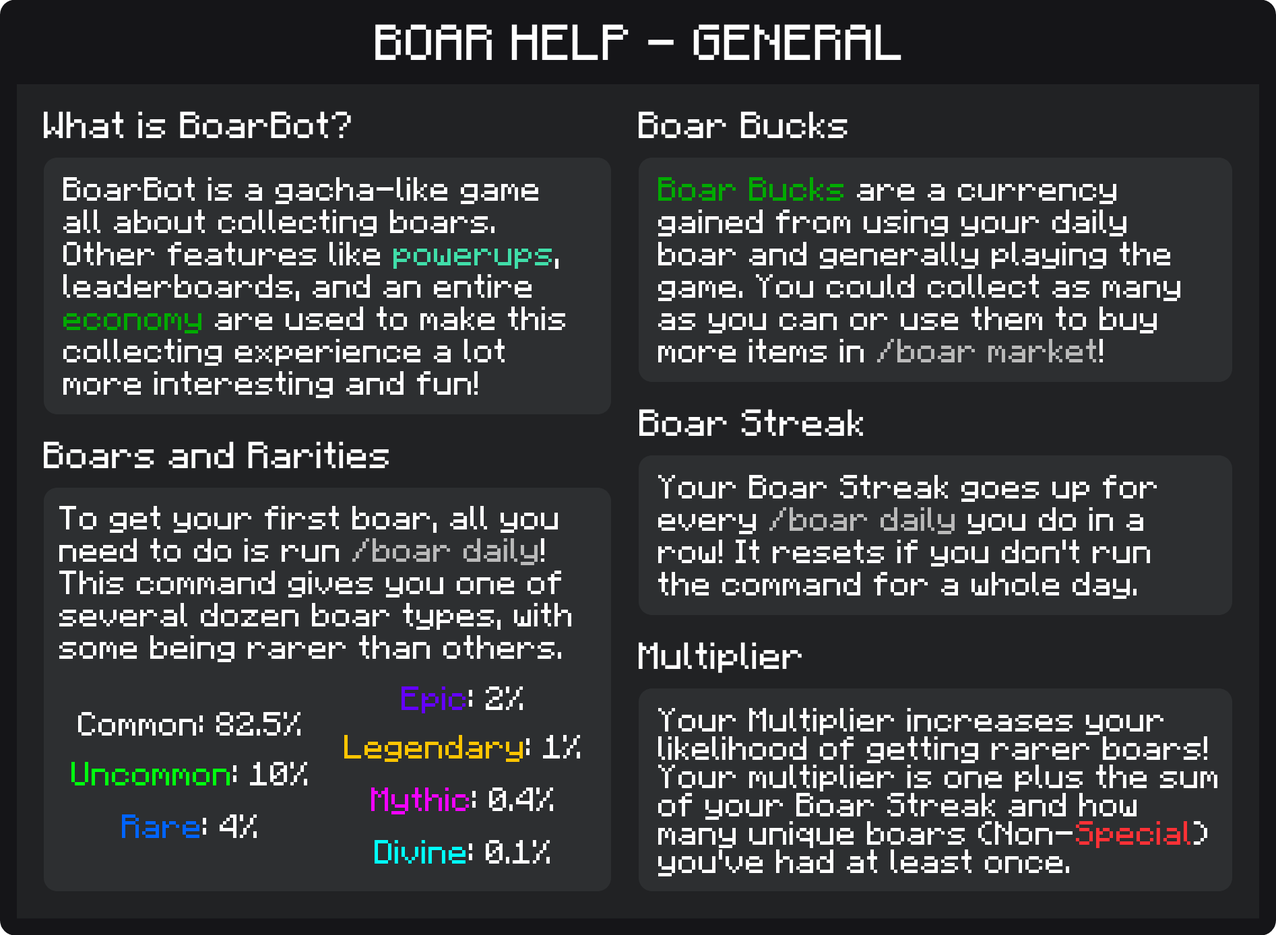
<style>
.page{position:relative;width:1276px;height:935px;background:#2d2f31}
.page>*{position:absolute;margin:0}
.t1{font:40.4px "F77-Minecraft";color:#ffffff}
.t2{font:30.3px "F77-Minecraft";color:#ffffff}
.t3{font:26.9px "F77-Minecraft";color:#ffffff}
.t4{font:26.9px "F77-Minecraft";color:#40dea9}
.t5{font:26.9px "F77-Minecraft";color:#00aa00}
.t6{font:26.9px "F77-Minecraft";color:#bababa}
.t7{font:26.9px "F77-Minecraft";color:#6400ff}
.t8{font:26.9px/28.3px "F77-Minecraft";color:#ffffff}
.t9{font:26.9px/28.3px "F77-Minecraft";color:#ff3136}
.t10{font:26.9px "F77-Minecraft";color:#ffc500}
.t11{font:26.9px "F77-Minecraft";color:#00ff0f}
.t12{font:26.9px "F77-Minecraft";color:#f300ff}
.t13{font:26.9px "F77-Minecraft";color:#0064ff}
.t14{font:26.9px "F77-Minecraft";color:#00fffb}
</style>
<div class="page">
<p class="t1" style="left:375px;top:24px;width:526px;height:36px">BOAR HELP - GENERAL</p>
<p class="t2" style="left:44px;top:111px;width:307px;height:27px">What is BoarBot?</p>
<p class="t2" style="left:638px;top:111px;width:209px;height:27px">Boar Bucks</p>
<p class="t3" style="left:63px;top:177px;width:502px;height:221px">BoarBot is a gacha-like game <br>all about collecting boars. <br>Other features like <span class="t4">powerups</span>, <br>leaderboards, and an entire <br><span class="t5">economy </span>are used to make this <br>collecting experience a lot <br>more interesting and fun!</p>
<p class="t3" style="left:658px;top:177px;width:522px;height:185px"><span class="t5">Boar Bucks </span>are a currency <br>gained from using your daily <br>boar and generally playing the <br>game. You could collect as many <br>as you can or use them to buy <br>more items in <span class="t6">/boar market</span>!</p>
<p class="t2" style="left:639px;top:409px;width:224px;height:27px">Boar Streak</p>
<p class="t2" style="left:44px;top:441px;width:345px;height:27px">Boars and Rarities</p>
<p class="t3" style="left:658px;top:475px;width:498px;height:124px">Your Boar Streak goes up for<br>every <span class="t6">/boar daily </span>you do in a <br>row! It resets if you don't run <br>the command for a whole day.</p>
<p class="t3" style="left:59px;top:506px;width:512px;height:156px">To get your first boar, all you<br>need to do is run <span class="t6">/boar daily</span>!<br>This command gives you one of<br>several dozen boar types, with <br>some being rarer than others.</p>
<p class="t2" style="left:638px;top:642px;width:163px;height:31px">Multiplier</p>
<p class="t7" style="left:401px;top:686px;width:122px;height:27px">Epic<span class="t3">: 2%</span></p>
<p class="t3" style="left:78px;top:712px;width:222px;height:23px">Common: 82.5%</p>
<p class="t8" style="left:658px;top:708px;width:559px;height:168px">Your Multiplier increases your<br>likelihood of getting rarer boars!<br>Your multiplier is one plus the sum <br>of your Boar Streak and how <br>many unique boars (Non-<span class="t9">Special</span>) <br>you've had at least once.</p>
<p class="t10" style="left:344px;top:735px;width:236px;height:27px">Legendary<span class="t3">: 1%</span></p>
<p class="t11" style="left:71px;top:762px;width:236px;height:23px">Uncommon<span class="t3">: 10%</span></p>
<p class="t12" style="left:371px;top:787px;width:182px;height:27px">Mythic<span class="t3">: 0.4%</span></p>
<p class="t13" style="left:122px;top:814px;width:135px;height:24px">Rare<span class="t3">: 4%</span></p>
<p class="t14" style="left:374px;top:840px;width:176px;height:23px">Divine<span class="t3">: 0.1%</span></p>
</div>
